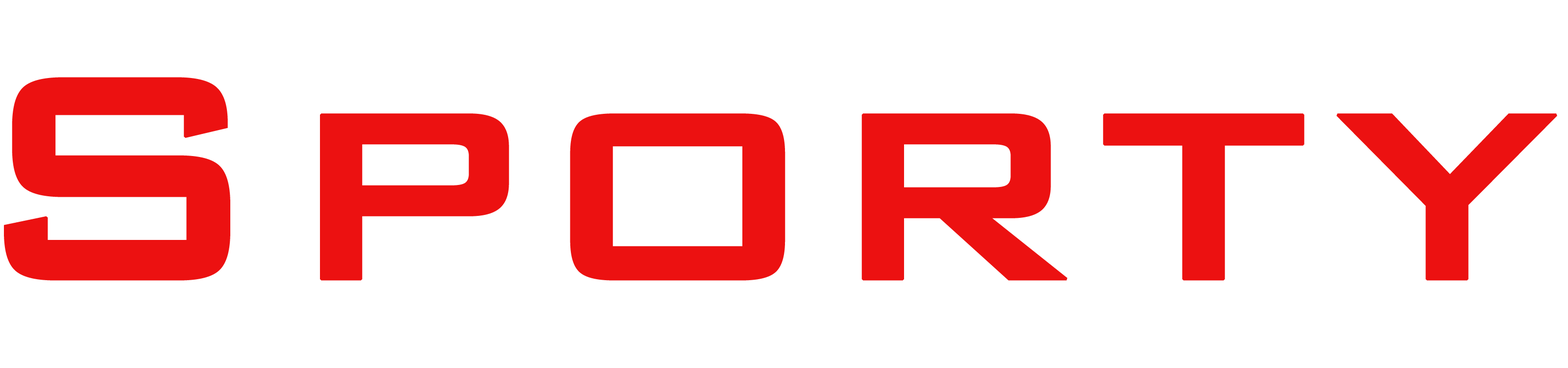
<style>
.page{position:relative;width:1568px;height:368px;background:#ffffff}
.page>*{position:absolute;margin:0}
.t1{font:387.9px "BankGothicBT-Medium";color:#ec1111;font-weight:bold}
</style>
<div class="page">
<p class="t1" style="left:4px;top:77px;width:1553px;height:203px">Sporty</p>
</div>
